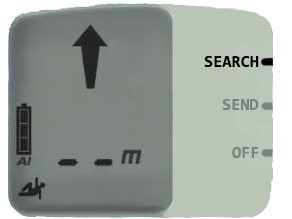
<style>
.page{position:relative;width:292px;height:219px;background:#bac5b7}
.page>*{position:absolute;margin:0}
.t1{font:16.7px "Consolas-Bold";color:#000000}
.t2{font:16.7px "Consolas-Bold";color:#79847e}
</style>
<div class="page">
<p class="t1" style="left:204px;top:55px;width:55px;height:12px">SEARCH</p>
<p class="t2" style="left:222px;top:98px;width:37px;height:12px">SEND</p>
<p class="t2" style="left:232px;top:146px;width:27px;height:12px">OFF</p>
</div>
